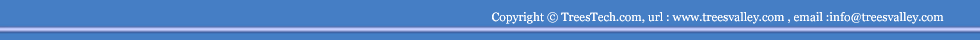
<style>
.page{position:relative;width:980px;height:40px;background:#457ec5}
.page>*{position:absolute;margin:0}
.t1{font:12px "Georgia";color:#ffffff}
</style>
<div class="page">
<p class="t1" style="left:492px;top:12px;width:452px;height:12px">Copyright © TreesTech.com, url : www.treesvalley.com , email :info@treesvalley.com</p>
</div>
